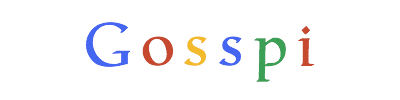
<style>
.page{position:relative;width:400px;height:100px;background:#ffffff}
.page>*{position:absolute;margin:0}
.t1{font:60px "Catull-Regular";color:#4566f0}
.t2{font:60px "Catull-Regular";color:#c6482e}
.t3{font:60px "Catull-Regular";color:#f3ba2c}
.t4{font:60px "Catull-Regular";color:#3b9f55}
</style>
<div class="page">
<p class="t1" style="left:85px;top:22px;width:45px;height:45px">G</p>
<p class="t2" style="left:298px;top:26px;width:17px;height:40px">i</p>
<p class="t2" style="left:142px;top:36px;width:32px;height:30px">o</p>
<p class="t3" style="left:184px;top:36px;width:23px;height:30px">s</p>
<p class="t1" style="left:219px;top:36px;width:23px;height:30px">s</p>
<p class="t4" style="left:254px;top:37px;width:32px;height:45px">p</p>
</div>
